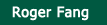
<style>
.page{position:relative;width:107px;height:25px;background:#005941}
.page>*{position:absolute;margin:0}
.t1{font:14px "Tahoma";letter-spacing:0.02em;color:#ffffff;font-weight:bold}
</style>
<div class="page">
<p class="t1" style="left:12px;top:6px;width:77px;height:15px">Roger Fang</p>
</div>
